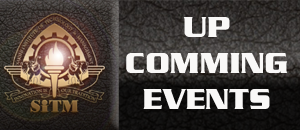
<style>
.page{position:relative;width:300px;height:130px}
.page>*{position:absolute;margin:0}
.t1{font:29.9px "SerpentineD-Bold";color:#f9f8f7}
</style>
<div class="page">
<p class="t1" style="left:126px;top:17px;width:162px;height:92px;text-align:center">UP<br>COMMING <br>EVENTS</p>
</div>
